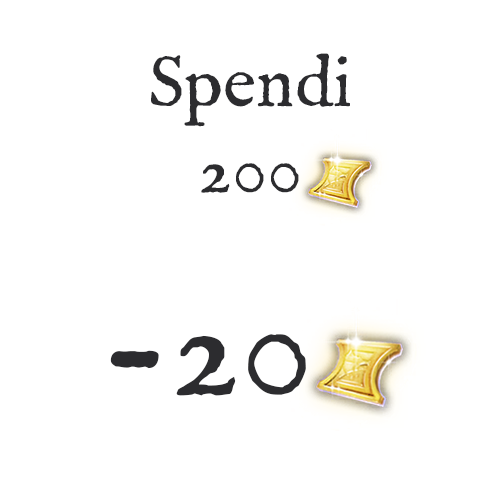
<style>
.page{position:relative;width:500px;height:500px;background:#ffffff}
.page>*{position:absolute;margin:0}
.t1{font:72px "IM_FELL_English_Roman";color:#2c2c2f}
.t2{font:150px "IM_FELL_English_Roman";color:#2c2c2f}
</style>
<div class="page">
<p class="t1" style="left:151px;top:53px;width:199px;height:140px;text-align:center">Spendi <br>200</p>
<p class="t2" style="left:110px;top:334px;width:196px;height:62px">-20</p>
</div>
